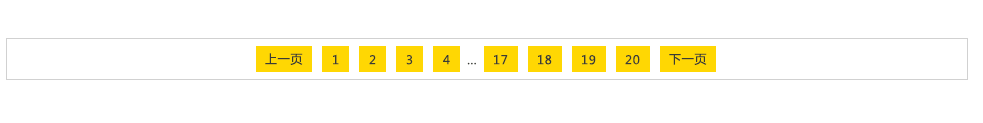
<style>
.page{position:relative;width:983px;height:123px;background:#ffffff}
.page>*{position:absolute;margin:0}
.t1{font:12px "MicrosoftYaHei";letter-spacing:0.06em;color:#393c35}
</style>
<div class="page">
<p class="t1" style="left:265px;top:53px;width:38px;height:12px">上一页</p>
<p class="t1" style="left:333px;top:54px;width:6px;height:11px">1</p>
<p class="t1" style="left:494px;top:54px;width:14px;height:11px">17</p>
<p class="t1" style="left:538px;top:54px;width:14px;height:11px">18</p>
<p class="t1" style="left:582px;top:54px;width:14px;height:11px">19</p>
<p class="t1" style="left:669px;top:53px;width:38px;height:12px">下一页</p>
<p class="t1" style="left:369px;top:55px;width:7px;height:10px">2</p>
<p class="t1" style="left:406px;top:55px;width:7px;height:10px">3</p>
<p class="t1" style="left:443px;top:55px;width:7px;height:10px">4</p>
<p class="t1" style="left:467px;top:62px;width:9px;height:3px">…</p>
<p class="t1" style="left:625px;top:55px;width:15px;height:10px">20</p>
</div>
